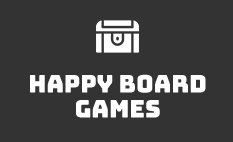
<style>
.page{position:relative;width:233px;height:142px;background:#333333}
.page>*{position:absolute;margin:0}
.t1{font:24px/25px "Bungee-Regular";color:#ffffff}
</style>
<div class="page">
<p class="t1" style="left:30px;top:74px;width:176px;height:44px;text-align:center">Happy Board Games</p>
</div>
